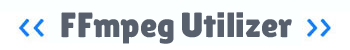
<style>
.page{position:relative;width:350px;height:50px;background:#fcffff}
.page>*{position:absolute;margin:0}
.t1{font:35px "LilitaOne";color:#58606d}
</style>
<div class="page">
<p class="t1" style="left:61px;top:12px;width:231px;height:32px">FFmpeg Utilizer</p>
</div>
